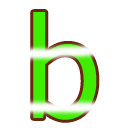
<style>
.page{position:relative;width:128px;height:128px;background:#ffffff}
.page>*{position:absolute;margin:0}
.t1{font:132.9px "SourceHanSansCN-Regular"}
</style>
<div class="page">
<p class="t1" style="left:33px;top:12px;width:64px;height:108px">b</p>
</div>
